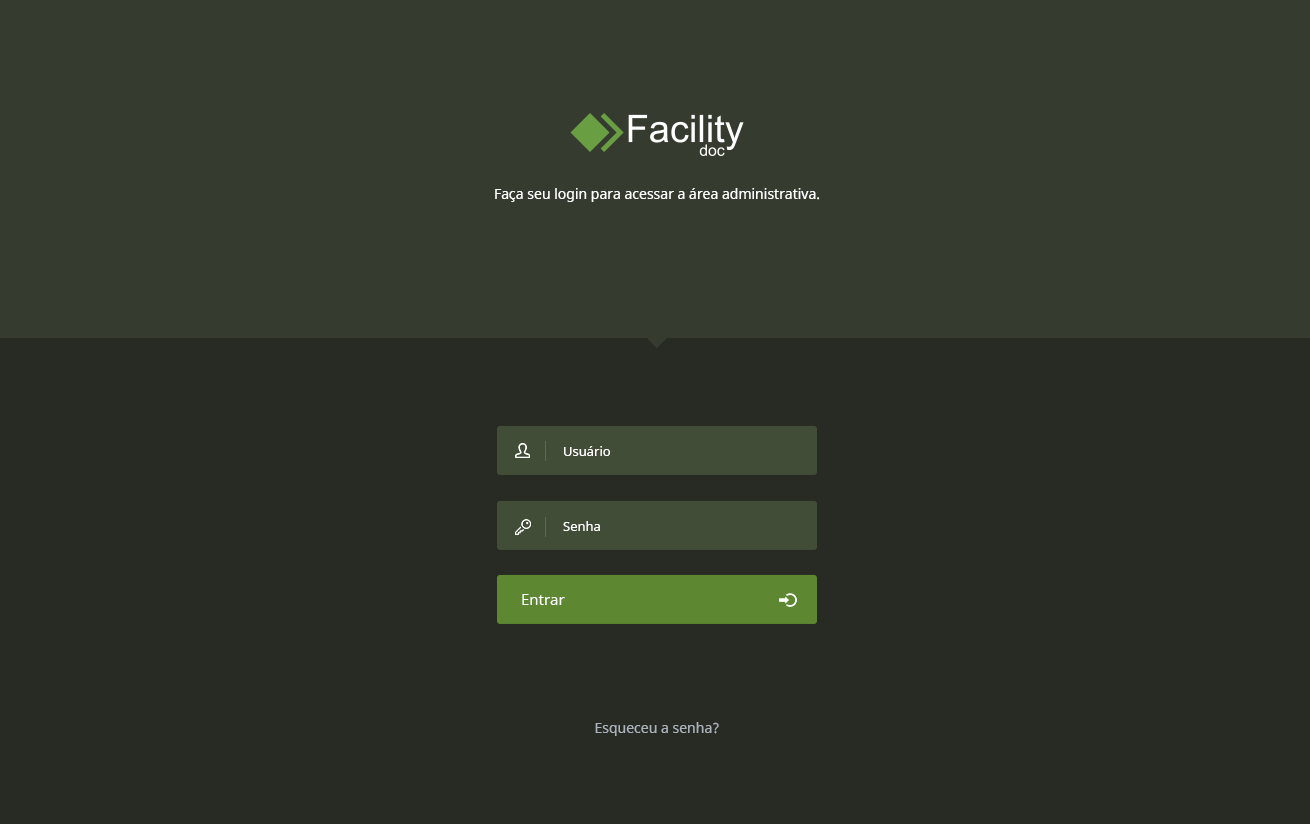
<style>
.page{position:relative;width:1310px;height:824px;background:#272b23}
.page>*{position:absolute;margin:0}
.t1{font:14px "NotoSans";color:#ffffff}
.t2{font:13px "NotoSans";color:#ffffff}
.t3{font:15px "NotoSans";color:#ffffff}
.t4{font:14px "NotoSans";color:#abb1bb}
</style>
<div class="page">
<p class="t1" style="left:495px;top:188px;width:325px;height:14px">Faça seu login para acessar a área administrativa.</p>
<p class="t2" style="left:564px;top:446px;width:46px;height:10px">Usuário</p>
<p class="t2" style="left:563px;top:521px;width:37px;height:10px">Senha</p>
<p class="t3" style="left:522px;top:594px;width:43px;height:11px">Entrar</p>
<p class="t4" style="left:595px;top:722px;width:124px;height:14px">Esqueceu a senha?</p>
</div>
